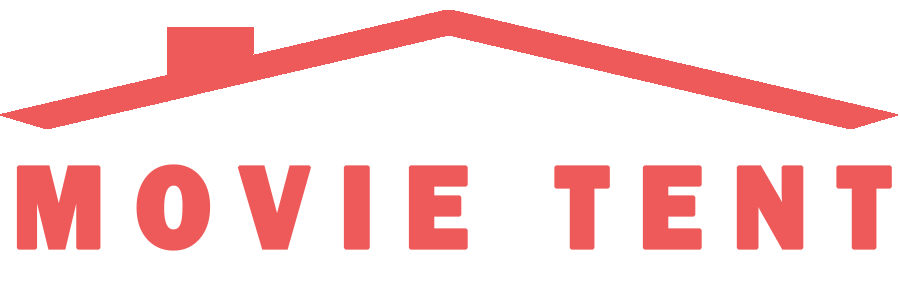
<style>
.page{position:relative;width:900px;height:300px;background:#ffffff}
.page>*{position:absolute;margin:0}
.t1{font:121.8px "FranklinGothic-Heavy";letter-spacing:0.24em;color:#ee5a5a;font-weight:bold;scale:0.91 1}
</style>
<div class="page">
<p class="t1" style="left:16px;top:164px;width:876px;height:87px">MOVIE TENT</p>
</div>
